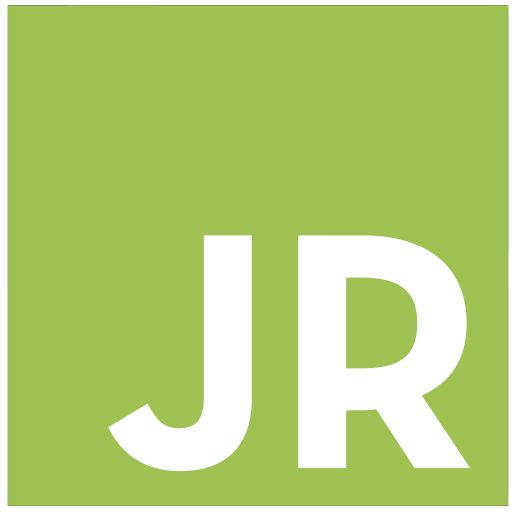
<style>
.page{position:relative;width:512px;height:512px;background:#9fc151}
.page>*{position:absolute;margin:0}
.t1{font:342px "NeutraText-Bold";color:#ffffff}
</style>
<div class="page">
<p class="t1" style="left:108px;top:235px;width:362px;height:237px">JR</p>
</div>
